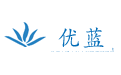
<style>
.page{position:relative;width:121px;height:75px;background:#ffffff}
.page>*{position:absolute;margin:0}
.t1{font:24px "STKaiti";letter-spacing:0.07em;color:#016cb7;text-transform:uppercase;scale:0.95 1}
</style>
<div class="page">
<p class="t1" style="left:58px;top:27px;width:46px;height:21px">优蓝</p>
</div>
